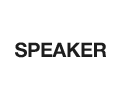
<style>
.page{position:relative;width:121px;height:100px;background:#ffffff}
.page>*{position:absolute;margin:0}
.t1{font:20px "Helvetica75-Bold";letter-spacing:-0.02em;color:#1d1d1d;text-transform:uppercase}
</style>
<div class="page">
<p class="t1" style="left:15px;top:42px;width:91px;height:16px">Speaker</p>
</div>
